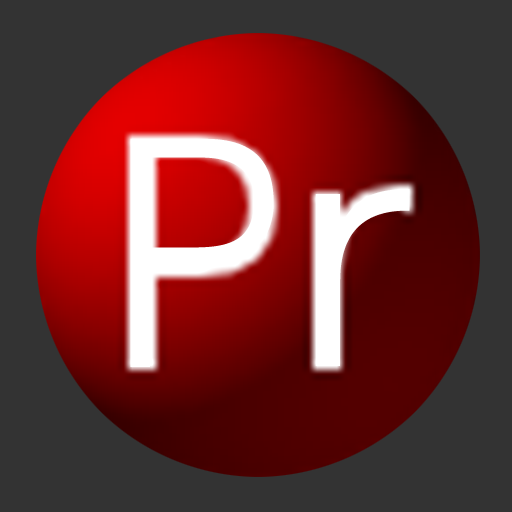
<style>
.page{position:relative;width:512px;height:512px;background:#333333}
.page>*{position:absolute;margin:0}
.t1{font:317.2px "Helvetica-Light";letter-spacing:0.2em;color:#ffffff;scale:0.91 1}
.t2{font:332.5px "Helvetica-Light";letter-spacing:0.2em;color:#ffffff;scale:1.22 1}
</style>
<div class="page">
<p class="t1" style="left:130px;top:138px;width:144px;height:229px">P</p>
<p class="t2" style="left:315px;top:189px;width:95px;height:177px">r</p>
</div>
